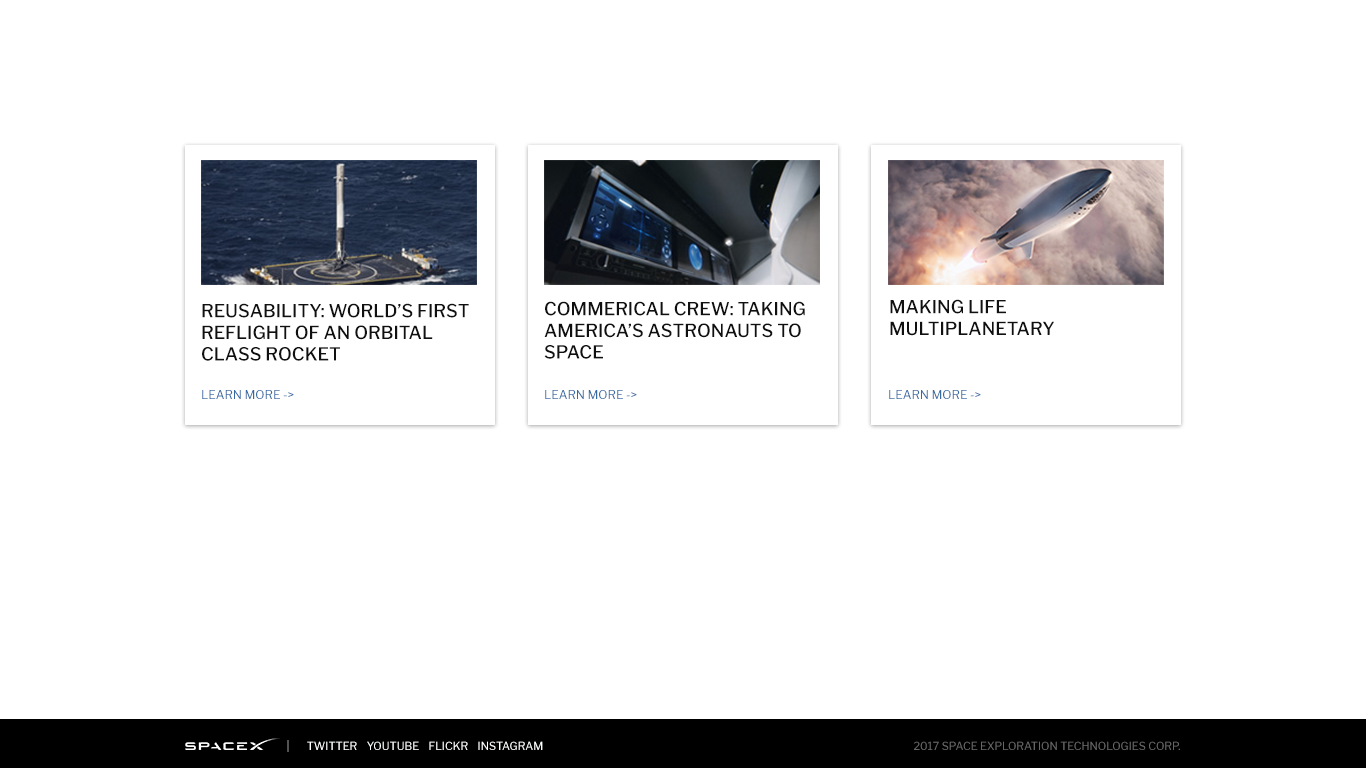
<style>
.page{position:relative;width:1366px;height:768px;background:#ffffff}
.page>*{position:absolute;margin:0}
.t1{font:18px "LibreFranklin-Medium";color:#101010}
.t2{font:12px "LibreFranklin-Regular";color:#3569a4}
.t3{font:11px "LibreFranklin-Regular";color:#feffff}
.t4{font:11px "LibreFranklin-Regular";color:#666666}
</style>
<div class="page">
<p class="t1" style="left:202px;top:303px;width:267px;height:58px">REUSABILITY: WORLD’S FIRST REFLIGHT OF AN ORBITAL CLASS ROCKET</p>
<p class="t1" style="left:544px;top:301px;width:261px;height:58px">COMMERICAL CREW: TAKING AMERICA’S ASTRONAUTS TO SPACE</p>
<p class="t1" style="left:890px;top:299px;width:164px;height:37px">MAKING LIFE MULTIPLANETARY</p>
<p class="t2" style="left:202px;top:390px;width:92px;height:9px">LEARN MORE -&gt;</p>
<p class="t2" style="left:545px;top:390px;width:92px;height:9px">LEARN MORE -&gt;</p>
<p class="t2" style="left:889px;top:390px;width:92px;height:9px">LEARN MORE -&gt;</p>
<p class="t3" style="left:307px;top:741px;width:236px;height:9px">TWITTER    YOUTUBE    FLICKR    INSTAGRAM</p>
<p class="t4" style="left:914px;top:741px;width:266px;height:9px">2017 SPACE EXPLORATION TECHNOLOGIES CORP.</p>
</div>
